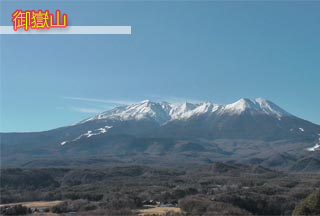
<style>
.page{position:relative;width:320px;height:216px}
.page>*{position:absolute;margin:0}
.t1{font:18px "JiyunoTsubasaFont";color:#eaff00}
</style>
<div class="page">
<p class="t1" style="left:13px;top:11px;width:53px;height:19px">御嶽山</p>
</div>
